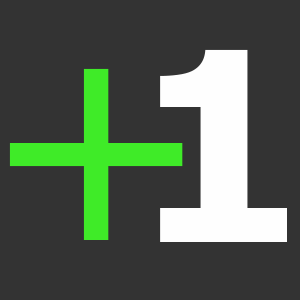
<style>
.page{position:relative;width:300px;height:300px;background:#333333}
.page>*{position:absolute;margin:0}
.t1{font:263.6px "Tahoma-Bold";color:#fefefe}
.t2{font:300px "Tahoma";color:#3feb28}
</style>
<div class="page">
<p class="t1" style="left:160px;top:49px;width:127px;height:193px">11111111</p>
<p class="t2" style="left:9px;top:68px;width:174px;height:172px">+</p>
</div>
